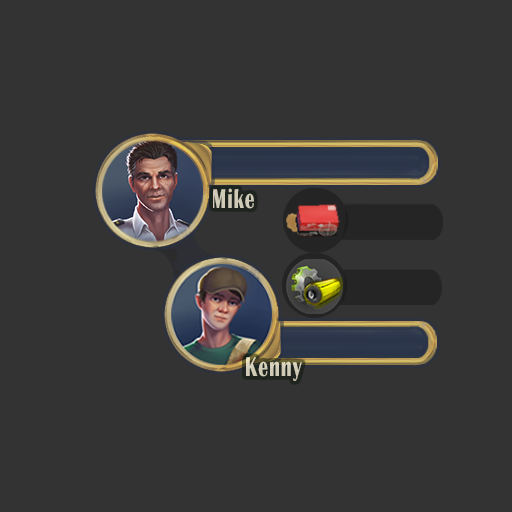
<style>
.page{position:relative;width:512px;height:512px;background:#333333}
.page>*{position:absolute;margin:0}
.t1{font:28px "BritannicBold";letter-spacing:0.049em;color:#d0cbb6;scale:0.69 1}
</style>
<div class="page">
<p class="t1" style="left:213px;top:188px;width:41px;height:21px">Mike</p>
<p class="t1" style="left:246px;top:357px;width:56px;height:24px">Kenny</p>
</div>
